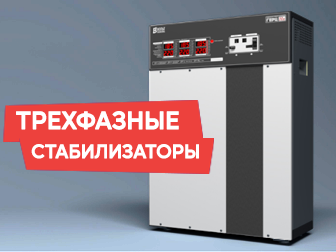
<style>
.page{position:relative;width:336px;height:252px}
.page>*{position:absolute;margin:0}
.t1{font:24px "MusticaPro-SemiBold";color:#ffffff;text-transform:uppercase;font-weight:bold}
.t2{font:18.7px "MusticaPro-SemiBold";color:#ffffff;text-transform:uppercase;font-weight:bold}
</style>
<div class="page">
<p class="t1" style="left:16px;top:111px;width:163px;height:19px">Трехфазные</p>
<p class="t2" style="left:31px;top:144px;width:168px;height:15px">Стабилизаторы</p>
</div>
